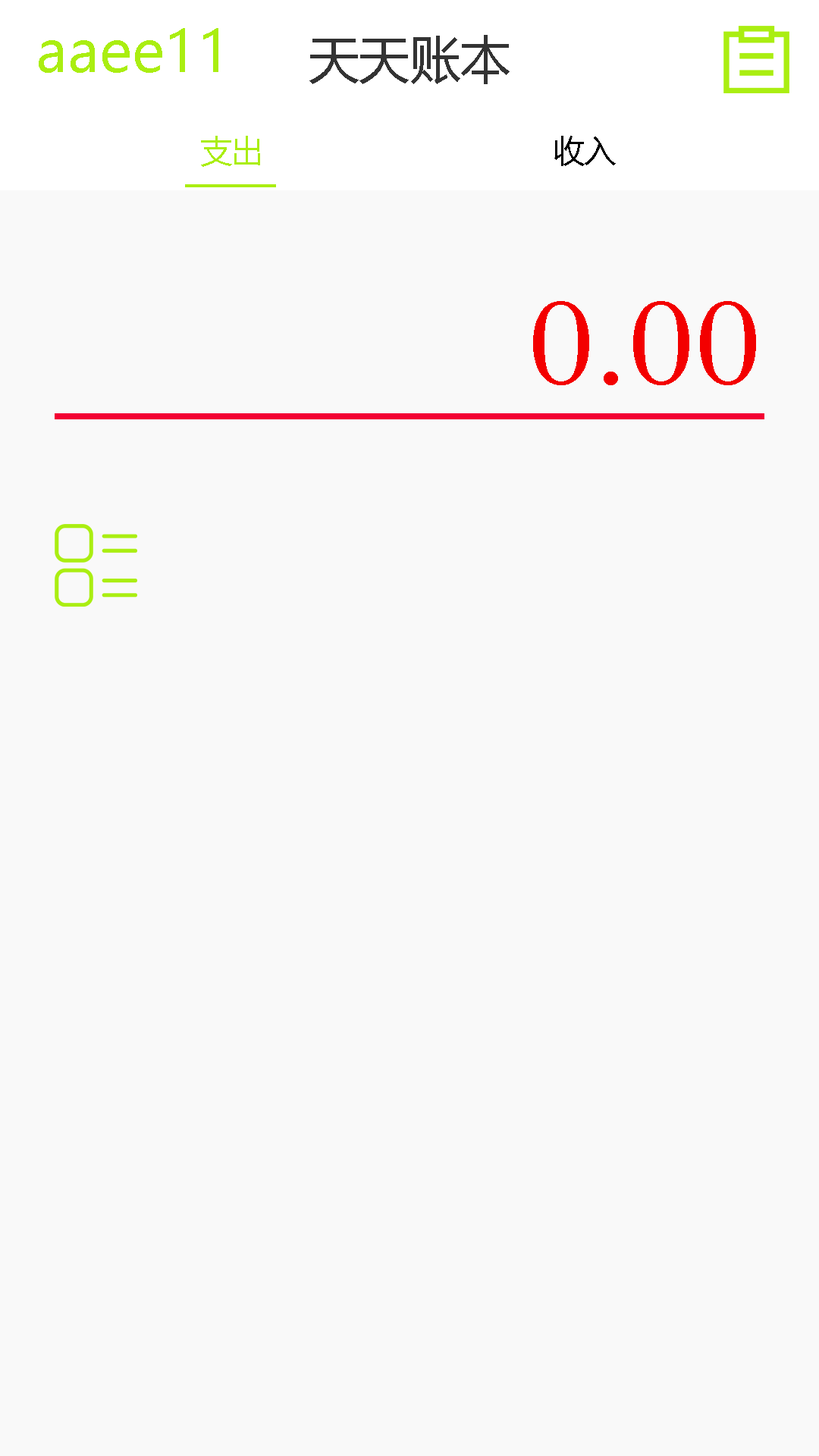
<style>
.page{position:relative;width:819px;height:1456px;background:#f9f9f9}
.page>*{position:absolute;margin:0}
.t1{font:56.9px "MicrosoftYaHei";color:#aaee11}
.t2{font:50.6px "MicrosoftYaHei";color:#333333}
.t3{font:31.6px "MicrosoftYaHei";color:#aaee11}
.t4{font:31.6px "MicrosoftYaHei";color:#000000}
.t5{font:120.1px "Century";color:#f30000}
</style>
<div class="page">
<p class="t1" style="left:39px;top:28px;width:179px;height:45px">aaee11</p>
<p class="t2" style="left:309px;top:35px;width:201px;height:49px">天天账本</p>
<p class="t3" style="left:201px;top:136px;width:59px;height:31px">支出</p>
<p class="t4" style="left:554px;top:136px;width:62px;height:30px">收入</p>
<p class="t5" style="left:533px;top:301px;width:223px;height:84px">0.00</p>
</div>
